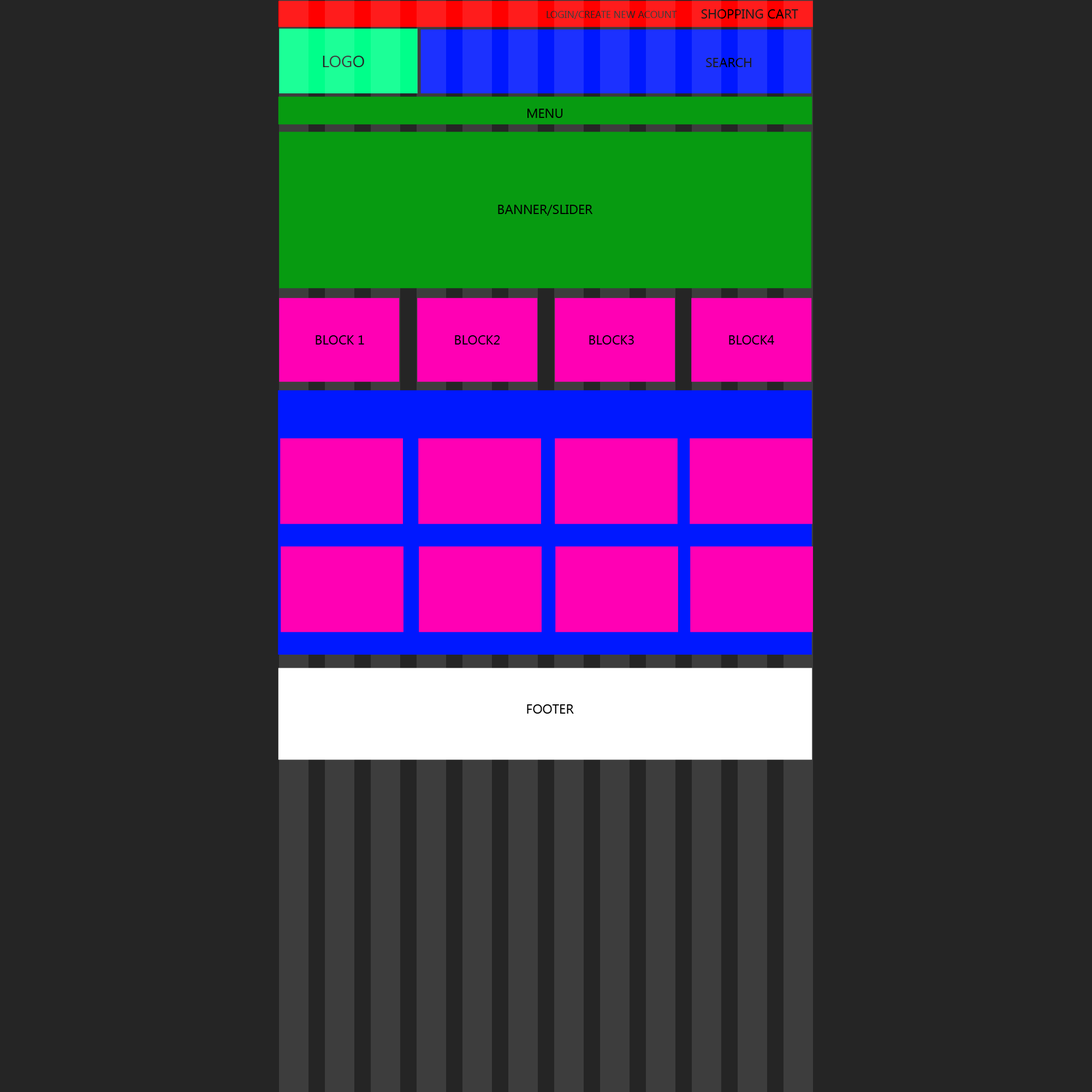
<style>
.page{position:relative;width:1092px;height:1092px;background:#252525}
.page>*{position:absolute;margin:0}
.t1{font:9.8px "SegoeUI";color:#252525;text-transform:uppercase}
.t2{font:13.1px "SegoeUI";text-transform:uppercase}
.t3{font:16.4px "SegoeUI";color:#252525;text-transform:uppercase}
.t4{font:13.1px "SegoeUI";color:#000000;text-transform:uppercase}
</style>
<div class="page">
<p class="t1" style="left:547px;top:11px;width:130px;height:8px">login/create new acount</p>
<p class="t2" style="left:701px;top:9px;width:97px;height:10px">shopping cart</p>
<p class="t3" style="left:323px;top:56px;width:41px;height:11px">Logo</p>
<p class="t2" style="left:706px;top:58px;width:45px;height:9px">search</p>
<p class="t4" style="left:527px;top:109px;width:36px;height:9px">menu</p>
<p class="t4" style="left:498px;top:205px;width:95px;height:11px">banner/slider</p>
<p class="t4" style="left:316px;top:335px;width:48px;height:10px">block 1</p>
<p class="t4" style="left:455px;top:335px;width:45px;height:10px">block2</p>
<p class="t4" style="left:589px;top:335px;width:45px;height:10px">block3</p>
<p class="t4" style="left:729px;top:335px;width:45px;height:10px">block4</p>
<p class="t4" style="left:527px;top:704px;width:47px;height:10px">footer</p>
</div>
